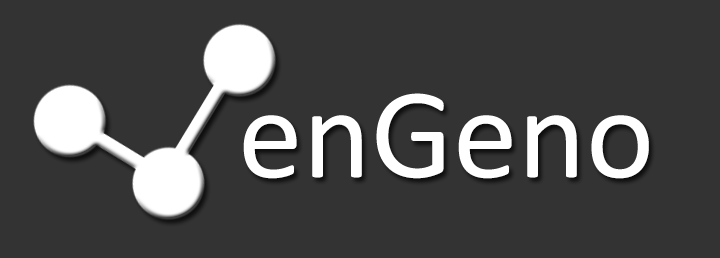
<style>
.page{position:relative;width:720px;height:258px;background:#333333}
.page>*{position:absolute;margin:0}
.t1{font:130px "Calibri";color:#ffffff}
</style>
<div class="page">
<p class="t1" style="left:243px;top:93px;width:406px;height:86px">enGeno</p>
</div>
